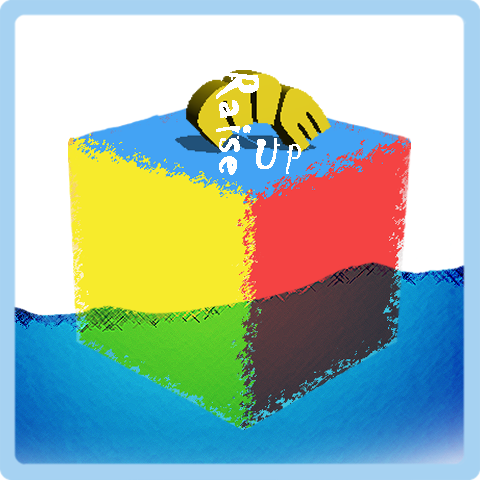
<style>
.page{position:relative;width:480px;height:480px;background:#ffffff}
.page>*{position:absolute;margin:0}
.t1{font:58.4px/107.9px "Chiller-Regular";color:#ffffff;font-weight:bold}
.t2{font:58.1px "Chiller-Regular";color:#ffffff;font-variant:small-caps;font-weight:bold}
</style>
<div class="page">
<p class="t1" style="left:216px;top:72px;width:43px;height:103px">Raise</p>
<p class="t2" style="left:256px;top:138px;width:45px;height:36px">Up</p>
</div>
